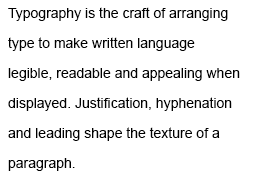
<style>
.page{position:relative;width:256px;height:192px;background:#ffffff}
.page>*{position:absolute;margin:0}
.t1{font:14px/30px "ArialMT";color:#000000}
</style>
<div class="page">
<p class="t1" style="left:8px;top:7px;width:232px;height:164px">Typography is the craft of arranging type to make written language legible, readable and appealing when displayed. Justification, hyphenation and leading shape the texture of a paragraph.</p>
</div>
